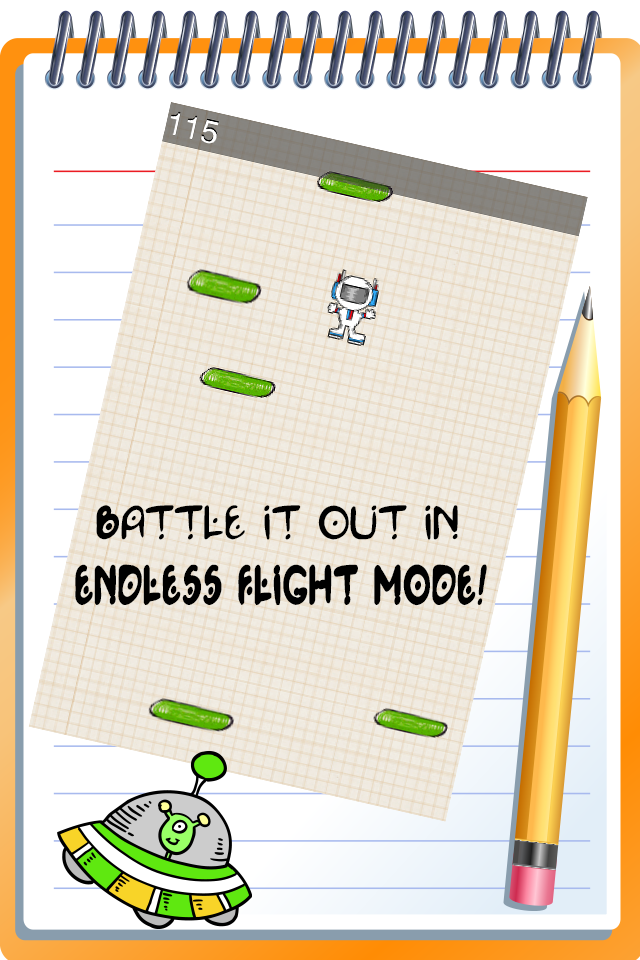
<style>
.page{position:relative;width:640px;height:960px;background:#ffffff}
.page>*{position:absolute;margin:0}
.t1{font:35.7px "Space-Pontiff-Regular";color:#000000;scale:0.89 1}
.t2{font:42.5px "Space-Pontiff-Regular";color:#000000;scale:0.65 1}
</style>
<div class="page">
<p class="t1" style="left:96px;top:505px;width:362px;height:35px">Battle it out in</p>
<p class="t2" style="left:75px;top:564px;width:412px;height:42px">ENDLESS FLIGHT MODE!</p>
</div>
